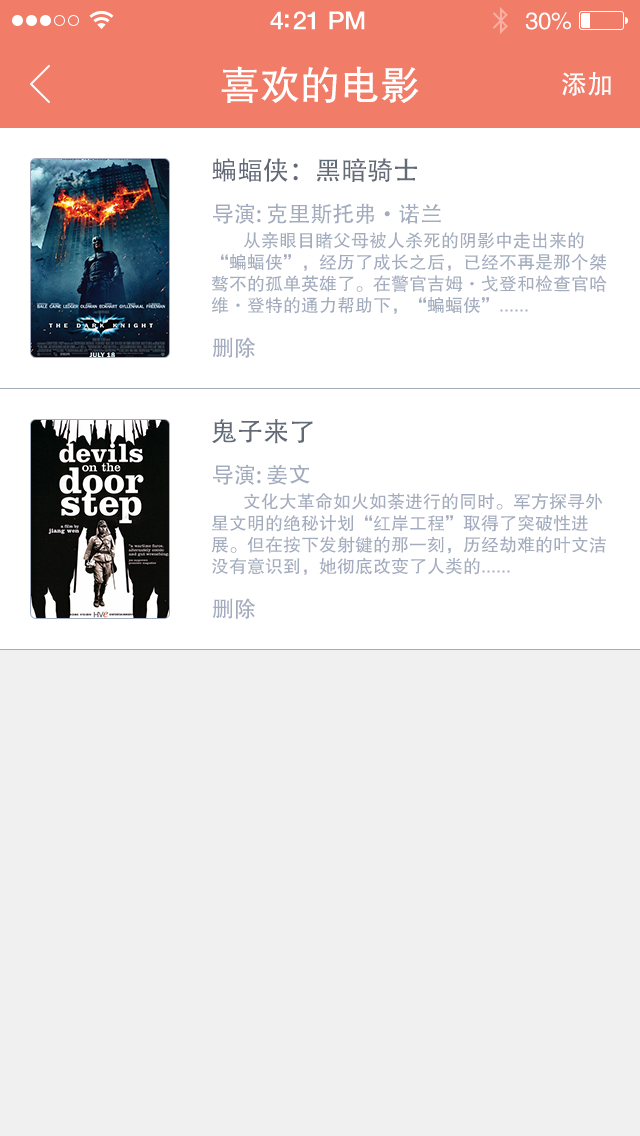
<style>
.page{position:relative;width:640px;height:1136px;background:#f0f0f0}
.page>*{position:absolute;margin:0}
.t1{font:25px "HelveticaNeue-Medium";letter-spacing:-0.02em;color:#ffffff}
.t2{font:24px "FZHTJW--GB1-0";letter-spacing:-0.02em;color:#ffffff}
.t3{font:40px "FZHTJW--GB1-0";color:#ffffff}
.t4{font:26px "AdobeHeitiStd-Regular";color:#ffffff}
.t5{font:26px "AdobeHeitiStd-Regular";color:#626a77}
.t6{font:22px "AdobeHeitiStd-Regular";color:#a3abbe}
.t7{font:18px "FZHTJW--GB1-0";color:#a3abbe}
</style>
<div class="page">
<p class="t1" style="left:270px;top:11px;width:95px;height:19px">4:21 PM</p>
<p class="t2" style="left:525px;top:12px;width:46px;height:18px">30%</p>
<p class="t3" style="left:221px;top:66px;width:198px;height:37px">喜欢的电影</p>
<p class="t4" style="left:562px;top:71px;width:49px;height:25px">添加</p>
<p class="t5" style="left:212px;top:158px;width:205px;height:24px">蝙蝠侠：黑暗骑士</p>
<p class="t6" style="left:213px;top:203px;width:228px;height:21px">导演: 克里斯托弗·诺兰</p>
<p class="t7" style="left:211px;top:232px;width:396px;height:82px">从亲眼目睹父母被人杀死的阴影中走出来的“蝙蝠侠”，经历了成长之后，已经不再是那个桀骜不的孤单英雄了。在警官吉姆·戈登和检查官哈维·登特的通力帮助下，“蝙蝠侠”......</p>
<p class="t6" style="left:213px;top:337px;width:43px;height:21px">删除</p>
<p class="t5" style="left:212px;top:419px;width:101px;height:25px">鬼子来了</p>
<p class="t6" style="left:213px;top:464px;width:97px;height:21px">导演: 姜文</p>
<p class="t7" style="left:211px;top:493px;width:395px;height:82px">文化大革命如火如荼进行的同时。军方探寻外星文明的绝秘计划“红岸工程”取得了突破性进展。但在按下发射键的那一刻，历经劫难的叶文洁没有意识到，她彻底改变了人类的......</p>
<p class="t6" style="left:213px;top:598px;width:43px;height:21px">删除</p>
</div>
